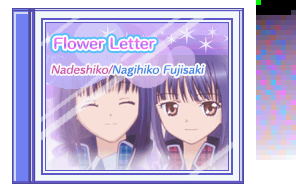
<style>
.page{position:relative;width:296px;height:192px}
.page>*{position:absolute;margin:0}
.t1{font:13.5px "HummingStd-B";letter-spacing:0.02em}
.t2{font:10px "HummingStd-D";letter-spacing:0.02em;color:#4888e8;font-style:italic}
.t3{font:10px "HummingStd-D";letter-spacing:0.02em;color:#d058b0;font-style:italic}
</style>
<div class="page">
<p class="t1" style="left:54px;top:36px;width:101px;height:14px">Flower Letter</p>
<p class="t2" style="left:51px;top:64px;width:154px;height:13px"><span class="t3">Nadeshiko/</span>Nagihiko Fujisaki</p>
</div>
